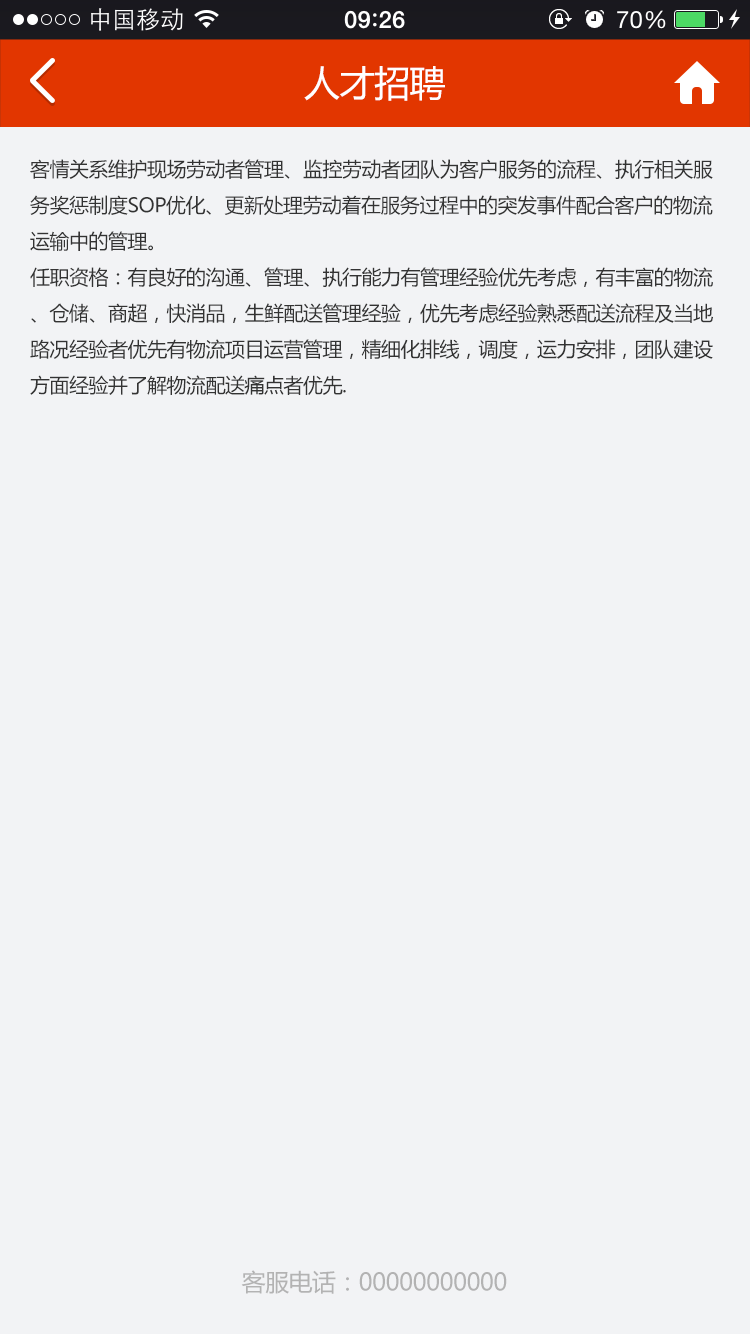
<style>
.page{position:relative;width:750px;height:1334px;background:#f2f3f5}
.page>*{position:absolute;margin:0}
.t1{font:36px "MicrosoftYaHei";letter-spacing:-0.025em;color:#ffffff}
.t2{font:20px/36px "MicrosoftYaHei";letter-spacing:-0.025em;color:#333333}
.t3{font:24px "MicrosoftYaHei";letter-spacing:-0.025em;color:#b3b3b3}
</style>
<div class="page">
<p class="t1" style="left:304px;top:66px;width:141px;height:35px">人才招聘</p>
<p class="t2" style="left:30px;top:159px;width:683px;height:236px">客情关系维护现场劳动者管理、监控劳动者团队为客户服务的流程、执行相关服<br>务奖惩制度SOP优化、更新处理劳动着在服务过程中的突发事件配合客户的物流<br>运输中的管理。<br>任职资格：有良好的沟通、管理、执行能力有管理经验优先考虑，有丰富的物流、仓储、商超，快消品，生鲜配送管理经验，优先考虑经验熟悉配送流程及当地路况经验者优先有物流项目运营管理，精细化排线，调度，运力安排，团队建设方面经验并了解物流配送痛点者优先.</p>
<p class="t3" style="left:241px;top:1270px;width:266px;height:24px">客服电话：00000000000</p>
</div>
